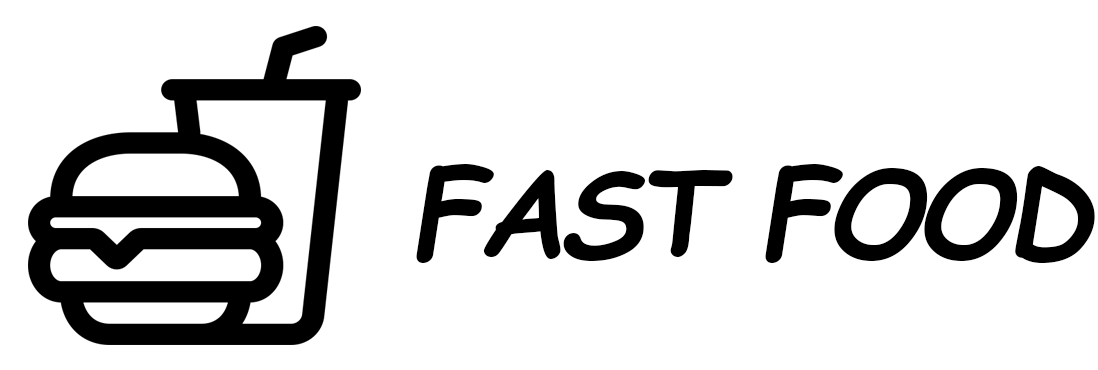
<style>
.page{position:relative;width:1098px;height:370px;background:#ffffff}
.page>*{position:absolute;margin:0}
.t1{font:120px "ComicSansMS-BoldItalic";letter-spacing:-0.05em;color:#000000}
</style>
<div class="page">
<p class="t1" style="left:416px;top:164px;width:679px;height:99px">FAST FOOD</p>
</div>
